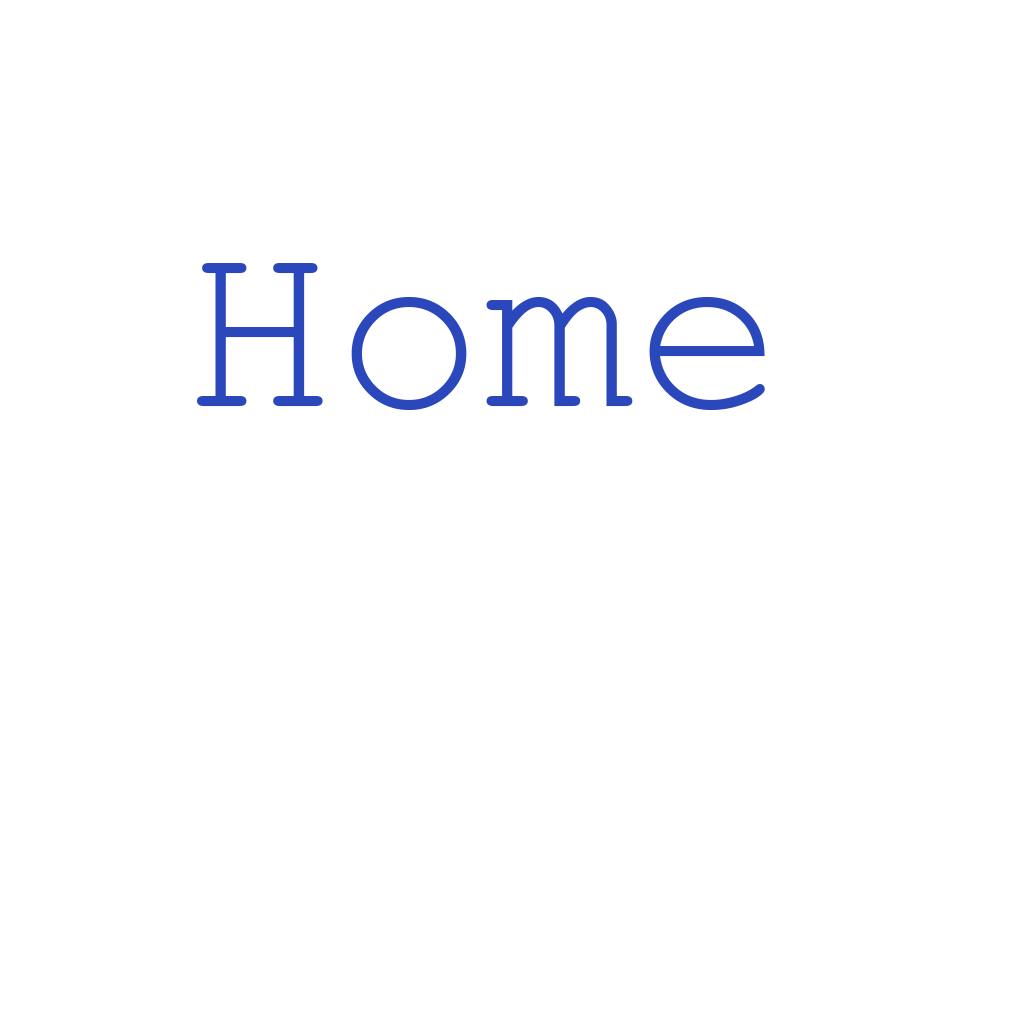
<style>
.page{position:relative;width:1024px;height:1024px;background:#ffffff}
.page>*{position:absolute;margin:0}
.t1{font:250px "CourierNewPSMT";color:#2a47bb}
</style>
<div class="page">
<p class="t1" style="left:197px;top:263px;width:568px;height:147px">Home</p>
</div>
